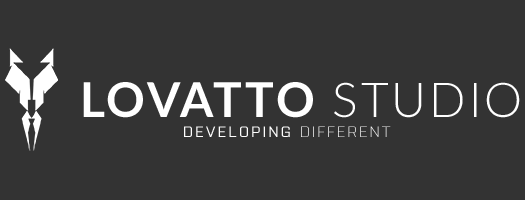
<style>
.page{position:relative;width:525px;height:200px;background:#333333}
.page>*{position:absolute;margin:0}
.t1{font:48px "Lato-Bold";letter-spacing:0.06em;color:#ffffff}
.t2{font:48px "Lato-Light";letter-spacing:0.06em;color:#ffffff}
.t3{font:15px "Purista-Medium";letter-spacing:0.16em;color:#ffffff}
.t4{font:15px "Purista-Light";letter-spacing:0.16em;color:#ffffff}
</style>
<div class="page">
<p class="t1" style="left:83px;top:82px;width:437px;height:36px">LOVATTO <span class="t2">STUDIO</span></p>
<p class="t3" style="left:184px;top:126px;width:207px;height:11px">DEVELOPING<span class="t4"> DIFFERENT</span></p>
</div>
